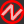
<style>
.page{position:relative;width:24px;height:24px;background:#333333}
.page>*{position:absolute;margin:0}
.t1{font:18.7px "ArialMT";color:#f1afaf;scale:1.12 1}
</style>
<div class="page">
<p class="t1" style="left:1px;top:4px;width:22px;height:17px;rotate:52deg">N</p>
</div>
